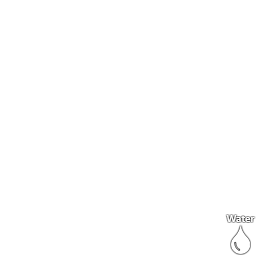
<style>
.page{position:relative;width:256px;height:256px;background:#ffffff}
.page>*{position:absolute;margin:0}
.t1{font:11px "Calibri-Bold";color:#ffffff}
</style>
<div class="page">
<p class="t1" style="left:226px;top:215px;width:29px;height:7px">Water</p>
</div>
